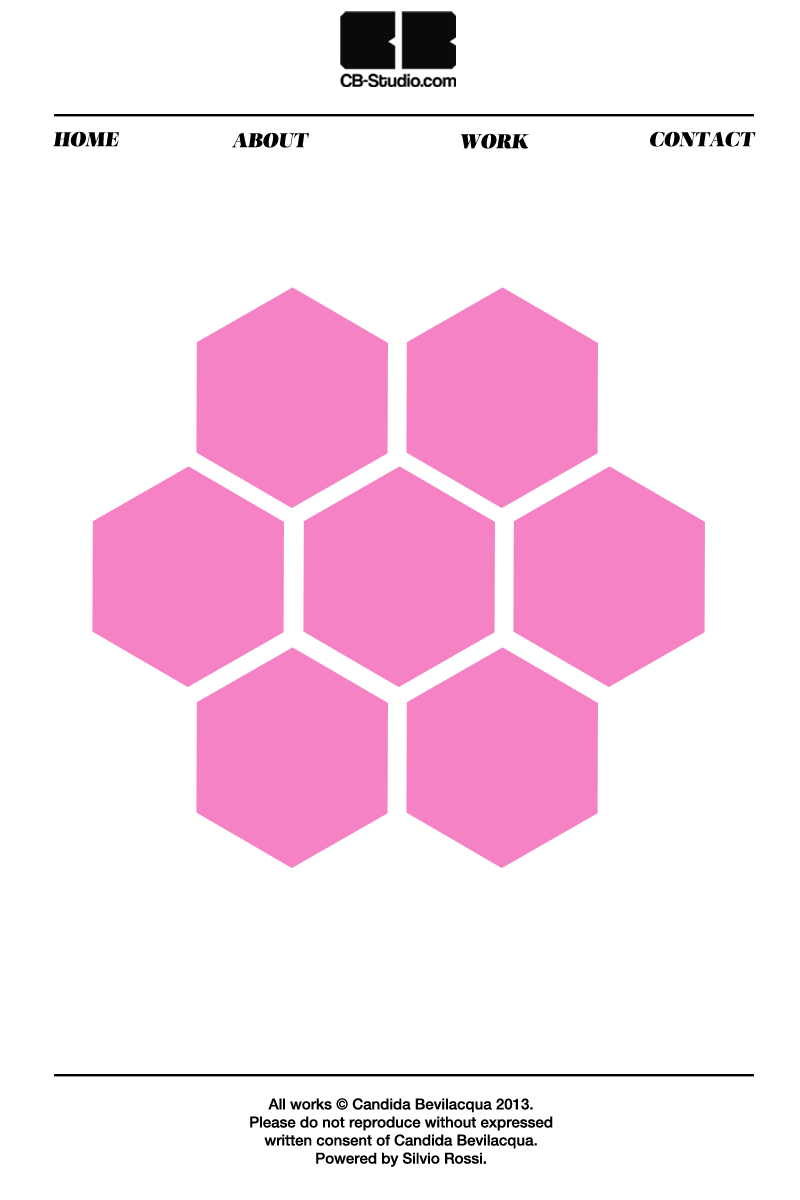
<style>
.page{position:relative;width:800px;height:1200px;background:#ffffff}
.page>*{position:absolute;margin:0}
.t1{font:19.6px "Salome-Italic_0_wt";color:#000000}
.t2{font:15px "HelveticaNeue-Medium";color:#000000}
</style>
<div class="page">
<p class="t1" style="left:53px;top:131px;width:66px;height:16px">HOME</p>
<p class="t1" style="left:232px;top:132px;width:77px;height:16px">ABOUT</p>
<p class="t1" style="left:461px;top:133px;width:68px;height:16px">WORK</p>
<p class="t1" style="left:650px;top:131px;width:106px;height:16px">CONTACT</p>
<p class="t2" style="left:250px;top:1098px;width:303px;height:69px;text-align:center">All works © Candida Bevilacqua 2013.<br>Please do not reproduce without expressed<br>written consent of Candida Bevilacqua.<br>Powered by Silvio Rossi.</p>
</div>
